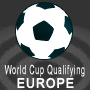
<style>
.page{position:relative;width:90px;height:90px;background:#333333}
.page>*{position:absolute;margin:0}
.t1{font:12.6px "ArialMT";letter-spacing:0.08em;color:#ffffff;font-weight:bold;scale:0.55 1}
.t2{font:13.2px "ArialMT";letter-spacing:0.08em;color:#ffffff;font-weight:bold;scale:0.91 1}
</style>
<div class="page">
<p class="t1" style="left:4px;top:64px;width:81px;height:13px">World Cup Qualifying</p>
<p class="t2" style="left:17px;top:77px;width:57px;height:12px">EUROPE</p>
</div>
